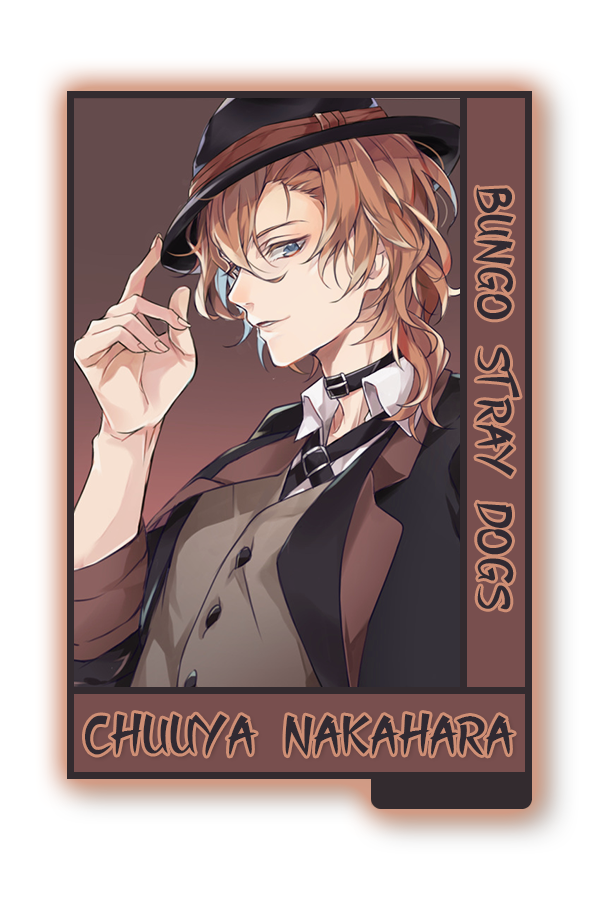
<style>
.page{position:relative;width:600px;height:900px;background:#ffffff}
.page>*{position:absolute;margin:0}
.t1{font:48.8px "Moyko";color:#312a32}
.t2{font:54.2px "Moyko";color:#312a32}
</style>
<div class="page">
<p class="t1" style="left:475px;top:187px;width:45px;height:423px;rotate:90deg">BUNGO STRAY DOGS</p>
<p class="t2" style="left:85px;top:713px;width:429px;height:43px">CHUUYA NAKAHARA</p>
</div>
